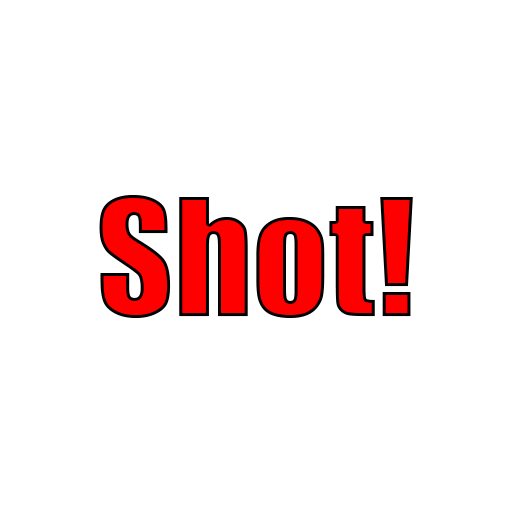
<style>
.page{position:relative;width:512px;height:512px;background:#ffffff}
.page>*{position:absolute;margin:0}
.t1{font:150px "Impact";color:#ff0000}
</style>
<div class="page">
<p class="t1" style="left:99px;top:195px;width:314px;height:123px">Shot!</p>
</div>
